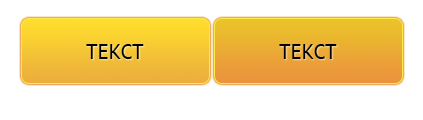
<style>
.page{position:relative;width:423px;height:120px;background:#ffffff}
.page>*{position:absolute;margin:0}
.t1{font:21px "PTSans-Regular";color:#000000}
</style>
<div class="page">
<p class="t1" style="left:86px;top:44px;width:58px;height:15px">ТЕКСТ</p>
<p class="t1" style="left:279px;top:44px;width:58px;height:15px">ТЕКСТ</p>
</div>
